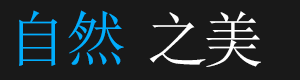
<style>
.page{position:relative;width:300px;height:80px;background:#191919}
.page>*{position:absolute;margin:0}
.t1{font:60.4px "SimSun";letter-spacing:-0.025em;color:#00adfc}
.t2{font:60.4px "SimSun";letter-spacing:-0.07em;color:#ffffff}
</style>
<div class="page">
<p class="t1" style="left:19px;top:10px;width:105px;height:56px">自然</p>
<p class="t2" style="left:149px;top:11px;width:112px;height:56px">之美</p>
</div>
